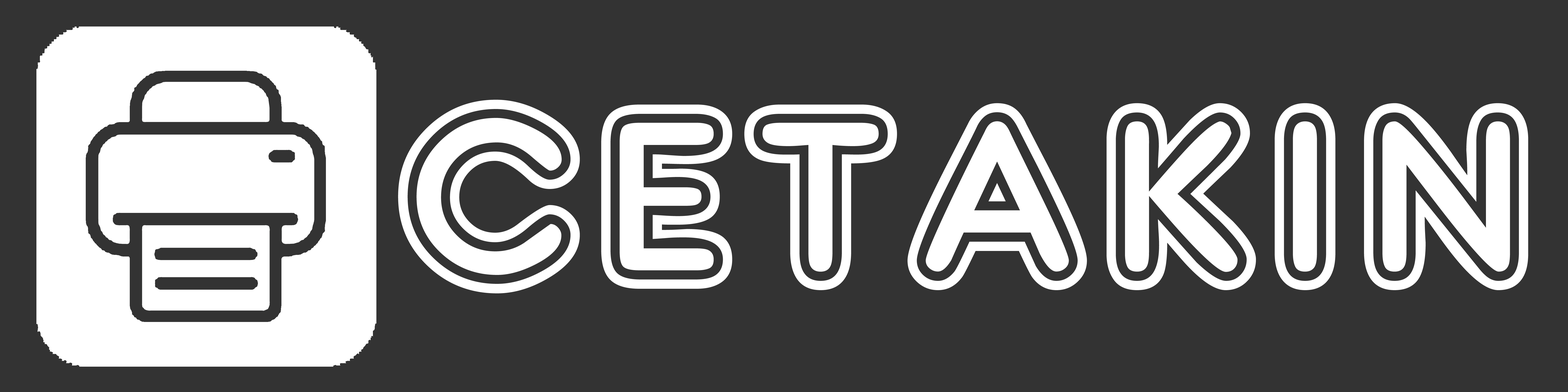
<style>
.page{position:relative;width:1568px;height:392px;background:#333333}
.page>*{position:absolute;margin:0}
.t1{font:276.6px "ARDELANEY";color:#ffffff}
</style>
<div class="page">
<p class="t1" style="left:398px;top:100px;width:1130px;height:193px">CETAKIN</p>
</div>
